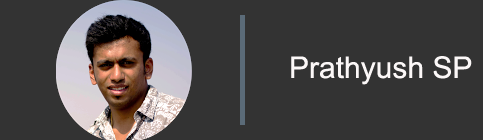
<style>
.page{position:relative;width:483px;height:140px;background:#333333}
.page>*{position:absolute;margin:0}
.t1{font:30px "ArialMT";color:#fcf8f8}
</style>
<div class="page">
<p class="t1" style="left:291px;top:56px;width:181px;height:29px">Prathyush SP</p>
</div>
